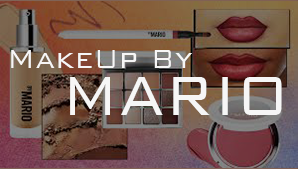
<style>
.page{position:relative;width:298px;height:169px}
.page>*{position:absolute;margin:0}
.t1{font:34.8px "BankGothicBT-Light";letter-spacing:0.01em;color:#f6f6f6;scale:0.9 1}
.t2{font:74.1px "BankGothicBT-Light";letter-spacing:0.01em;color:#f6f6f6;scale:0.85 1}
</style>
<div class="page">
<p class="t1" style="left:11px;top:50px;width:181px;height:18px">MakeUp By</p>
<p class="t2" style="left:70px;top:77px;width:212px;height:38px">MARIO</p>
</div>
